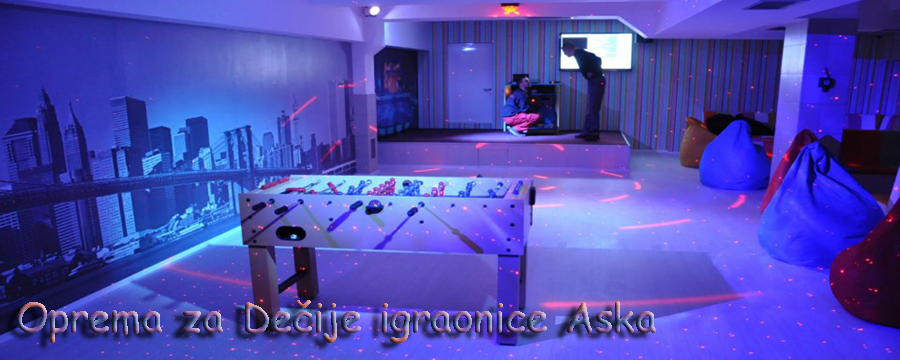
<style>
.page{position:relative;width:900px;height:360px}
.page>*{position:absolute;margin:0}
.t1{font:40px "ComicSansMS-Bold"}
</style>
<div class="page">
<p class="t1" style="left:17px;top:300px;width:639px;height:43px">Oprema za Dečije igraonice Aska</p>
</div>
